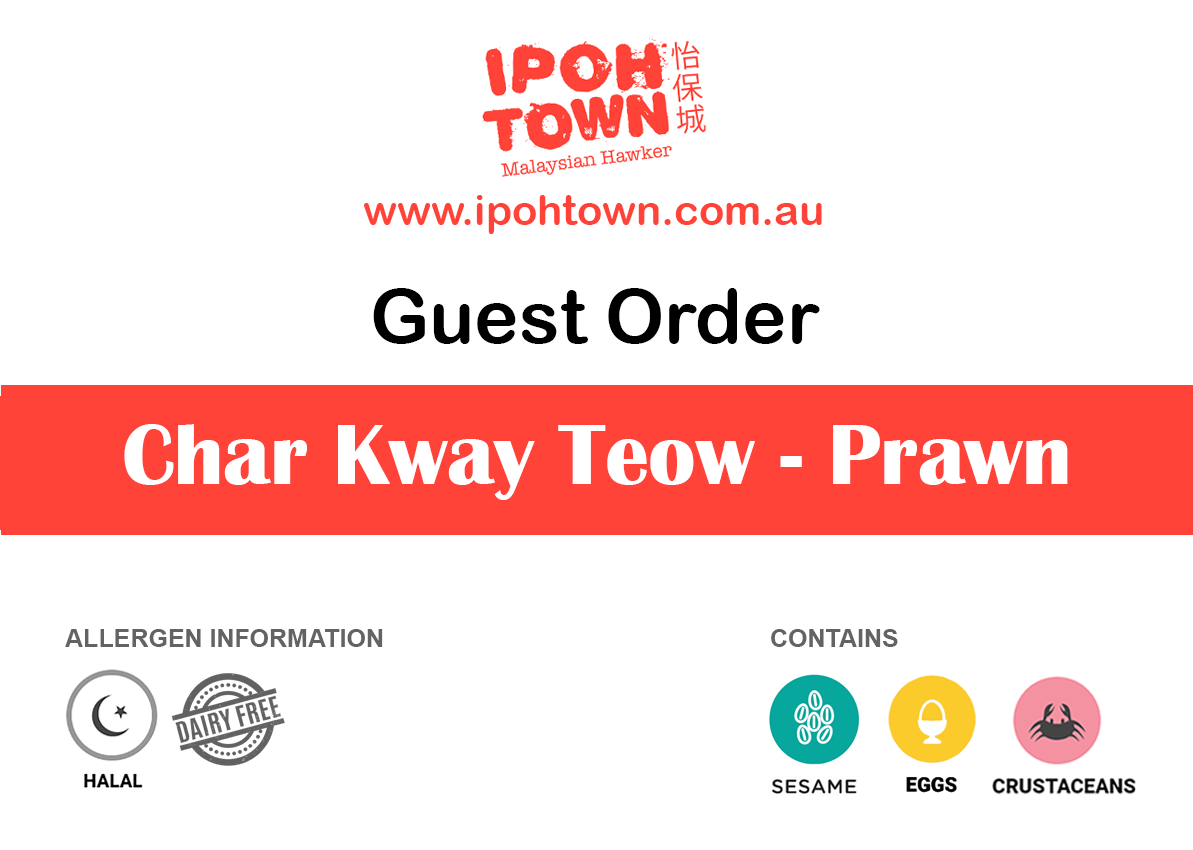
<style>
.page{position:relative;width:1193px;height:850px;background:#ffffff}
.page>*{position:absolute;margin:0}
.t1{font:41.7px "ArialRoundedMTBold";color:#ff4338}
.t2{font:75px "ArialRoundedMTBold";color:#000000}
.t3{font:87.5px "BritannicBold";color:#ffffff}
.t4{font:25px "Arial-BoldMT";color:#636363}
</style>
<div class="page">
<p class="t1" style="left:364px;top:195px;width:458px;height:39px">www.ipohtown.com.au</p>
<p class="t2" style="left:373px;top:288px;width:447px;height:56px">Guest Order</p>
<p class="t3" style="left:124px;top:424px;width:944px;height:76px">Char Kway Teow - Prawn</p>
<p class="t4" style="left:65px;top:629px;width:318px;height:18px">ALLERGEN INFORMATION</p>
<p class="t4" style="left:771px;top:629px;width:127px;height:18px">CONTAINS</p>
</div>
